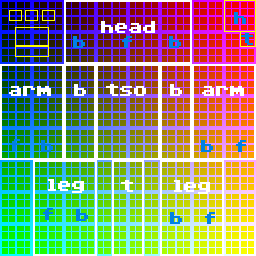
<style>
.page{position:relative;width:256px;height:256px}
.page>*{position:absolute;margin:0}
.t1{font:16px "C64Pro-Style";color:#0081e4}
.t2{font:16px "C64Pro-Style";color:#ffffff}
</style>
<div class="page">
<p class="t1" style="left:234px;top:12px;width:12px;height:12px">h</p>
<p class="t2" style="left:101px;top:21px;width:54px;height:12px">head</p>
<p class="t1" style="left:73px;top:36px;width:12px;height:12px">b</p>
<p class="t1" style="left:122px;top:36px;width:10px;height:12px">f</p>
<p class="t1" style="left:169px;top:36px;width:12px;height:12px">b</p>
<p class="t1" style="left:241px;top:33px;width:12px;height:12px">t</p>
<p class="t2" style="left:9px;top:86px;width:42px;height:10px">arm</p>
<p class="t2" style="left:74px;top:84px;width:12px;height:12px">b</p>
<p class="t2" style="left:106px;top:84px;width:40px;height:12px">tso</p>
<p class="t2" style="left:170px;top:84px;width:12px;height:12px">b</p>
<p class="t2" style="left:202px;top:86px;width:42px;height:10px">arm</p>
<p class="t1" style="left:10px;top:139px;width:10px;height:12px">f</p>
<p class="t1" style="left:41px;top:140px;width:12px;height:12px">b</p>
<p class="t1" style="left:201px;top:140px;width:12px;height:12px">b</p>
<p class="t1" style="left:236px;top:140px;width:10px;height:12px">f</p>
<p class="t2" style="left:48px;top:179px;width:36px;height:14px">leg</p>
<p class="t2" style="left:121px;top:180px;width:12px;height:12px">t</p>
<p class="t2" style="left:174px;top:180px;width:36px;height:14px">leg</p>
<p class="t1" style="left:43px;top:208px;width:10px;height:12px">f</p>
<p class="t1" style="left:76px;top:209px;width:12px;height:12px">b</p>
<p class="t1" style="left:170px;top:212px;width:12px;height:12px">b</p>
<p class="t1" style="left:205px;top:212px;width:10px;height:12px">f</p>
</div>
